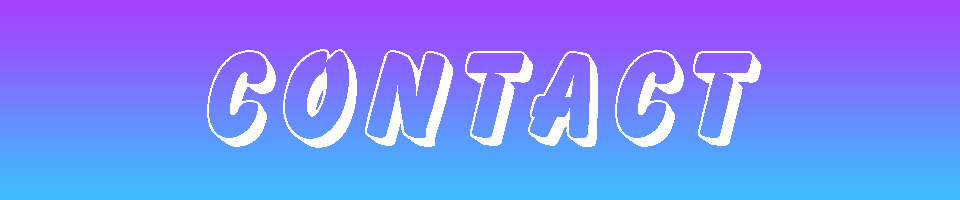
<style>
.page{position:relative;width:960px;height:200px}
.page>*{position:absolute;margin:0}
.t1{font:144px "BalloonDroShaD";letter-spacing:0.05em;color:#ffffff;text-transform:uppercase}
</style>
<div class="page">
<p class="t1" style="left:207px;top:49px;width:554px;height:99px">contact</p>
</div>
